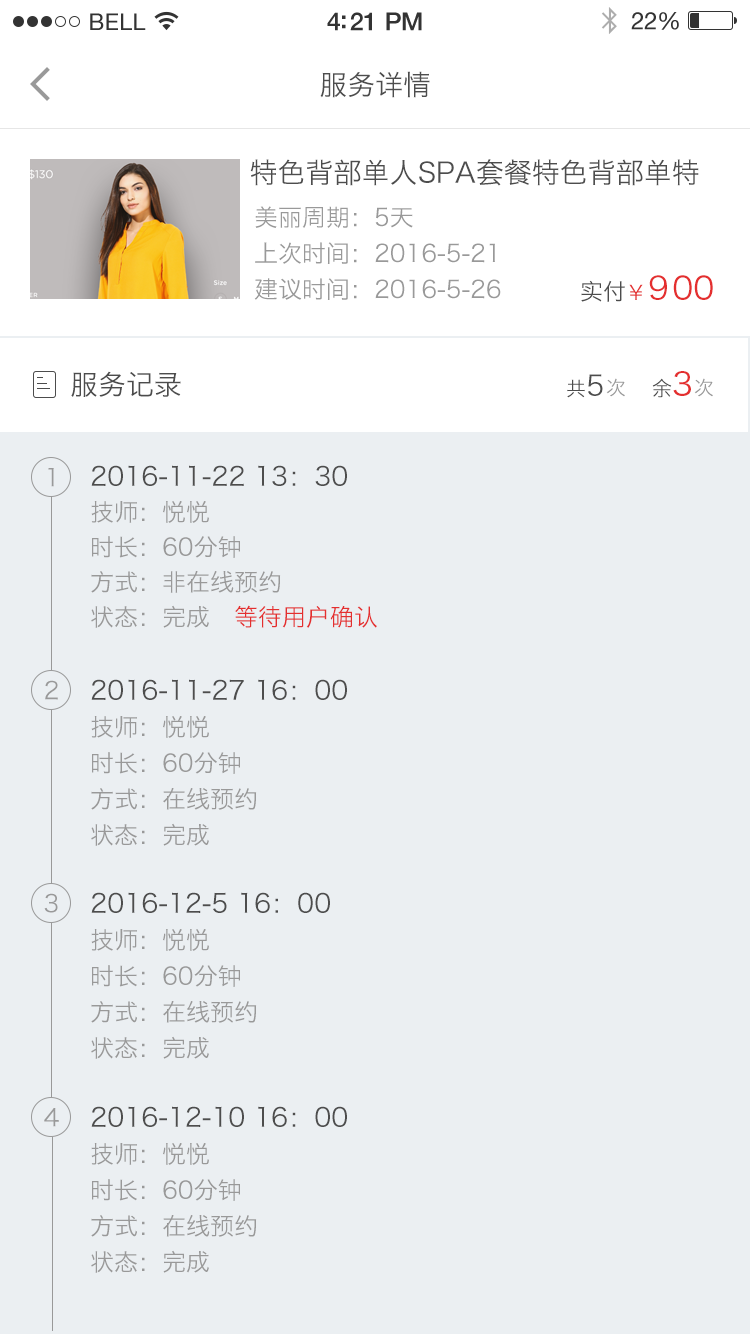
<style>
.page{position:relative;width:750px;height:1334px;background:#ebeff2}
.page>*{position:absolute;margin:0}
.t1{font:28px "HiraginoSansGB-W3";color:#4d4d4d}
.t2{font:24px/36px "HiraginoSansGB-W3";color:#999999}
.t3{font:23px "HiraginoSansGB-W3";color:#4c4c4c}
.t4{font:20px "HiraginoSansGB-W3";letter-spacing:0.1em;color:#e42f2f}
.t5{font:32px "HiraginoSansGB-W3";letter-spacing:0.1em;color:#e42f2f}
.t6{font:32px "HiraginoSansGB-W3";color:#e42f2f}
.t7{font:28px "HiraginoSansGB-W3";color:#4c4c4c}
.t8{font:20px "HiraginoSansGB-W3";color:#4c4c4c}
.t9{font:28px "HiraginoSansGB-W3";letter-spacing:0.5em;color:#4c4c4c}
.t10{font:32px "HiraginoSansGB-W3";letter-spacing:0.5em;color:#e42f2f}
.t11{font:20px "HiraginoSansGB-W3";color:#999999}
.t12{font:24px "HiraginoSansGB-W3";color:#999999}
.t13{font:24px/35px "HiraginoSansGB-W3";color:#999999}
.t14{font:26px/41px "HiraginoSansGB-W3";color:#4d4d4d}
.t15{font:24px/35px "HiraginoSansGB-W3";color:#e42f2f}
</style>
<div class="page">
<p class="t1" style="left:320px;top:71px;width:110px;height:27px">服务详情</p>
<p class="t1" style="left:250px;top:159px;width:449px;height:27px">特色背部单人SPA套餐特色背部单特</p>
<p class="t2" style="left:254px;top:206px;width:247px;height:94px;text-align:justify">美丽周期：5天<br>上次时间：2016-5-21<br>建议时间：2016-5-26</p>
<p class="t3" style="left:581px;top:275px;width:132px;height:27px">实付<span class="t4">￥</span><span class="t5">9</span><span class="t6">00</span></p>
<p class="t7" style="left:71px;top:371px;width:110px;height:26px">服务记录</p>
<p class="t8" style="left:567px;top:374px;width:36px;height:24px">共<span class="t9">5</span></p>
<p class="t8" style="left:652px;top:371px;width:39px;height:27px">余<span class="t10">3</span></p>
<p class="t11" style="left:606px;top:378px;width:19px;height:19px">次</p>
<p class="t11" style="left:694px;top:378px;width:19px;height:19px">次</p>
<p class="t12" style="left:48px;top:468px;width:6px;height:19px">1</p>
<p class="t13" style="left:91px;top:465px;width:286px;height:163px;text-align:justify"><span class="t14">2016-11-22 13：30<br></span>技师：悦悦<br>时长：60分钟<br>方式：非在线预约<br>状态：完成   <span class="t15">等待用户确认</span></p>
<p class="t12" style="left:45px;top:680px;width:13px;height:20px">2</p>
<p class="t2" style="left:91px;top:679px;width:256px;height:167px;text-align:justify"><span class="t14">2016-11-27 16：00<br></span>技师：悦悦<br>时长：60分钟<br>方式：在线预约<br>状态：完成</p>
<p class="t12" style="left:44px;top:893px;width:14px;height:20px">3</p>
<p class="t2" style="left:91px;top:892px;width:239px;height:167px;text-align:justify"><span class="t14">2016-12-5 16：00<br></span>技师：悦悦<br>时长：60分钟<br>方式：在线预约<br>状态：完成</p>
<p class="t12" style="left:44px;top:1108px;width:15px;height:19px">4</p>
<p class="t2" style="left:91px;top:1106px;width:256px;height:167px;text-align:justify"><span class="t14">2016-12-10 16：00<br></span>技师：悦悦<br>时长：60分钟<br>方式：在线预约<br>状态：完成</p>
</div>
